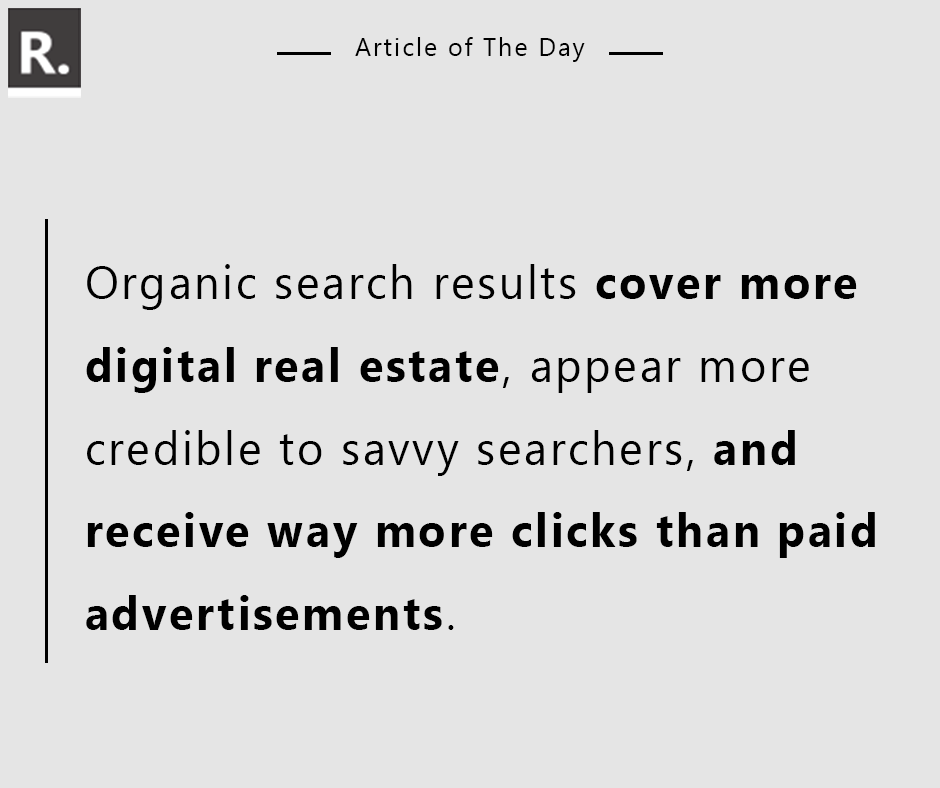
<style>
.page{position:relative;width:940px;height:788px;background:#e5e5e5}
.page>*{position:absolute;margin:0}
.t1{font:25px "SegoeUI";letter-spacing:0.08em;color:#000000}
.t2{font:47.2px/82.6px "SegoeUI-Bold";letter-spacing:0.06em;color:#000000;scale:0.95 1}
.t3{font:47.2px/82.6px "SegoeUI";letter-spacing:0.06em;color:#000000;scale:0.95 1}
</style>
<div class="page">
<p class="t1" style="left:355px;top:37px;width:230px;height:25px">Article of The Day</p>
<p class="t2" style="left:86px;top:264px;width:789px;height:366px;text-align:right"><span class="t3">Organic search results </span>cover more digital real estate<span class="t3">, appear more credible to savvy searchers, </span>and <br>receive way more clicks than paid advertisements<span class="t3">.</span></p>
</div>
